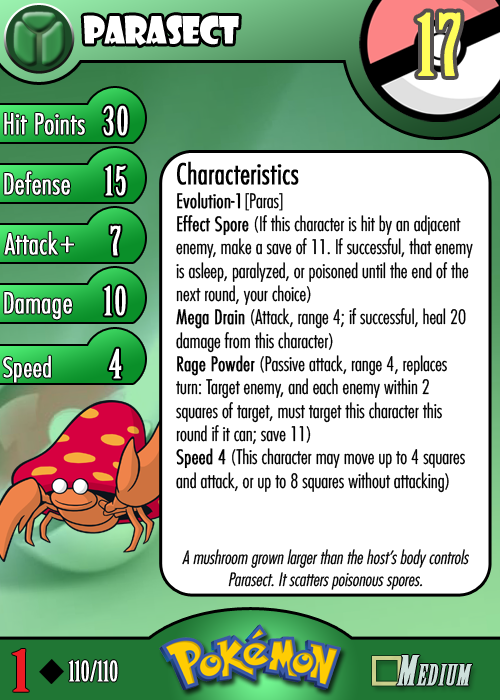
<style>
.page{position:relative;width:500px;height:700px;background:#ffffff}
.page>*{position:absolute;margin:0}
.t1{font:36.7px "ShowcardGothic-Reg";letter-spacing:-0.025em;color:#ffffff;scale:0.91 1}
.t2{font:83.3px "BirchStd";letter-spacing:0.025em;color:#fffd59;font-weight:bold}
.t3{font:27.8px "Futura-CondensedLight";color:#ffffff;font-weight:bold}
.t4{font:38.9px "BirchStd";letter-spacing:0.035em;color:#ffffff;font-weight:bold}
.t5{font:19.4px "Futura-CondensedLight";color:#010101}
.t6{font:27.8px "Futura-CondensedLight";color:#010101;font-weight:bold}
.t7{font:19.4px "Futura-CondensedLight";color:#010101;font-weight:bold}
.t8{font:30.6px "Futura-CondensedLight";color:#ffffff;font-weight:bold}
.t9{font:27.8px "FuturaCondensedBQ-Light";color:#ffffff;font-weight:bold}
.t10{font:18.1px "Futura-CondensedLight";color:#010101;font-style:italic}
.t11{font:55.6px "BirchStd";color:#ed1c24;font-weight:bold;scale:1.5 1}
.t12{font:27.8px "BirchStd";color:#ffffff;font-weight:bold}
</style>
<div class="page">
<p class="t1" style="left:83px;top:15px;width:156px;height:31px">parasect</p>
<p class="t2" style="left:417px;top:12px;width:44px;height:64px">17</p>
<p class="t3" style="left:4px;top:113px;width:81px;height:22px">Hit Points</p>
<p class="t4" style="left:103px;top:105px;width:25px;height:31px">30</p>
<p class="t5" style="left:176px;top:161px;width:297px;height:332px"><span class="t6">Characteristics<br></span><span class="t7">Evolution-1</span>[Paras]<br><span class="t7">Effect Spore</span> (If this character is hit by an adjacent enemy, make a save of 11. If successful, that enemy is asleep, paralyzed, or poisoned until the end of the next round, your choice)<br><span class="t7">Mega Drain</span> (Attack, range 4; if successful, heal 20 damage from this character)<br><span class="t7">Rage Powder</span> (Passive attack, range 4, replaces turn: Target enemy, and each enemy within 2 squares of target, must target this character this round if it can; save 11)<br><span class="t7">Speed 4</span> (This character may move up to 4 squares and attack, or up to 8 squares without attacking)</p>
<p class="t3" style="left:4px;top:171px;width:66px;height:24px">Defense</p>
<p class="t4" style="left:105px;top:165px;width:21px;height:31px">15</p>
<p class="t3" style="left:4px;top:231px;width:54px;height:24px">Attack</p>
<p class="t4" style="left:110px;top:225px;width:11px;height:31px">7</p>
<p class="t8" style="left:60px;top:236px;width:14px;height:17px">+</p>
<p class="t3" style="left:4px;top:292px;width:68px;height:28px">Damage</p>
<p class="t4" style="left:104px;top:285px;width:22px;height:31px">10</p>
<p class="t4" style="left:109px;top:348px;width:13px;height:31px">4</p>
<p class="t9" style="left:3px;top:355px;width:48px;height:28px">Speed</p>
<p class="t10" style="left:182px;top:549px;width:287px;height:41px;text-align:center">A mushroom grown larger than the host’s body controls Parasect. It scatters poisonous spores.</p>
<p class="t11" style="left:12px;top:649px;width:17px;height:43px">1</p>
<p class="t12" style="left:68px;top:660px;width:50px;height:22px">110/110</p>
</div>
